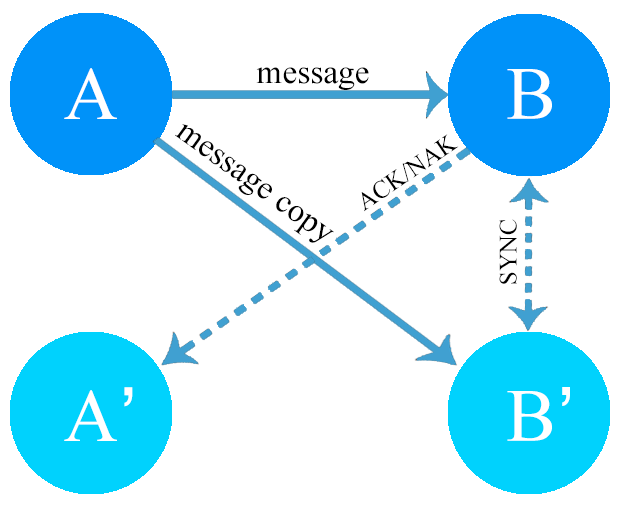
<style>
.page{position:relative;width:622px;height:509px;background:#ffffff}
.page>*{position:absolute;margin:0}
.t1{font:75px "TimesNewRomanPSMT";color:#ffffff}
.t2{font:33.3px "TimesNewRomanPSMT";color:#000000}
.t3{font:25px "TimesNewRomanPSMT";color:#000000}
.t4{font:75px "Helvetica";color:#ffffff}
</style>
<div class="page">
<p class="t1" style="left:64px;top:68px;width:53px;height:51px">A</p>
<p class="t2" style="left:256px;top:67px;width:113px;height:23px">message</p>
<p class="t1" style="left:507px;top:69px;width:45px;height:50px">B</p>
<p class="t2" style="left:175px;top:124px;width:159px;height:119px;rotate:36deg">message copy</p>
<p class="t3" style="left:361px;top:134px;width:98px;height:78px;rotate:-34deg">ACK/NAK</p>
<p class="t3" style="left:499px;top:219px;width:18px;height:65px;rotate:-90deg">SYNC</p>
<p class="t1" style="left:64px;top:387px;width:69px;height:54px">A<span class="t4">’</span></p>
<p class="t1" style="left:507px;top:387px;width:63px;height:54px">B<span class="t4">’</span></p>
</div>
